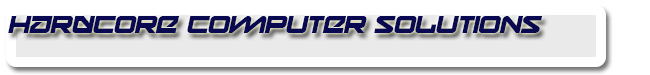
<style>
.page{position:relative;width:650px;height:75px;background:#ffffff}
.page>*{position:absolute;margin:0}
.t1{font:24px "Onky-Italic";color:#090952}
</style>
<div class="page">
<p class="t1" style="left:8px;top:16px;width:535px;height:17px">Hardcore Computer Solutions</p>
</div>
